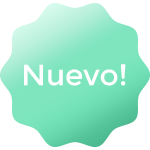
<style>
.page{position:relative;width:150px;height:150px;background:#ffffff}
.page>*{position:absolute;margin:0}
.t1{font:29.2px "Montserrat-Regular";color:#ffffff}
</style>
<div class="page">
<p class="t1" style="left:24px;top:64px;width:102px;height:22px">Nuevo!</p>
</div>
